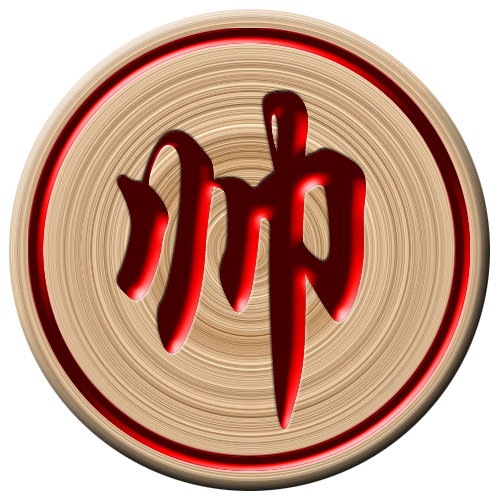
<style>
.page{position:relative;width:500px;height:500px;background:#ffffff}
.page>*{position:absolute;margin:0}
.t1{font:360px "STXingkai"}
</style>
<div class="page">
<p class="t1" style="left:117px;top:91px;width:249px;height:339px">帅</p>
</div>
